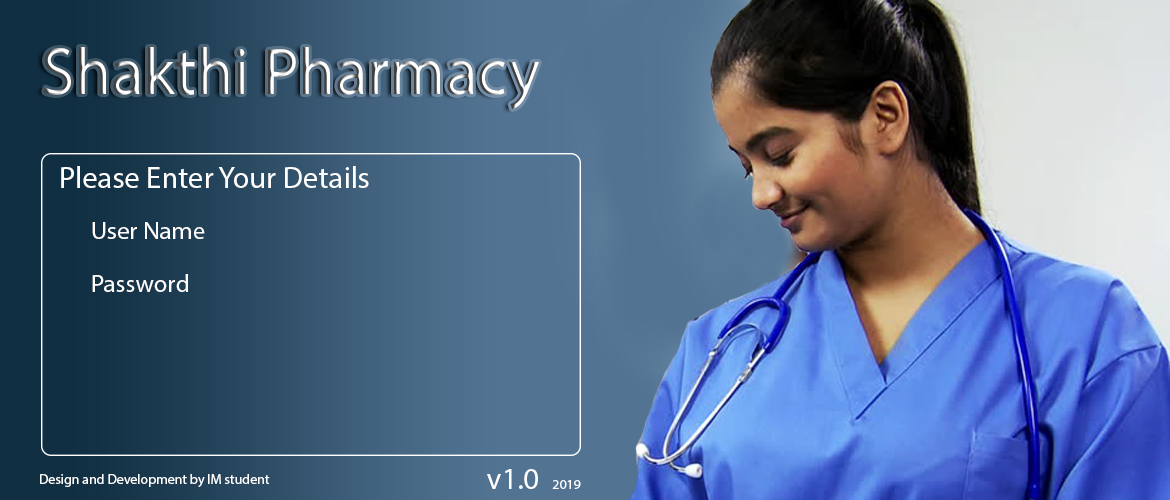
<style>
.page{position:relative;width:1170px;height:500px}
.page>*{position:absolute;margin:0}
.t1{font:66.7px "MyriadPro-Regular"}
.t2{font:30.6px "MyriadPro-Regular";color:#fefefe}
.t3{font:25px/52.8px "MyriadPro-Regular";color:#fefefe}
.t4{font:13.9px "MyriadPro-Regular";color:#fefefe}
.t5{font:13.9px "MyriadPro-Regular";color:#ffffff}
</style>
<div class="page">
<p class="t1" style="left:44px;top:47px;width:495px;height:62px">Shakthi Pharmacy</p>
<p class="t2" style="left:61px;top:166px;width:308px;height:22px">Please Enter Your Details</p>
<p class="t3" style="left:92px;top:222px;width:113px;height:70px">User Name<br>Password</p>
<p class="t2" style="left:487px;top:469px;width:94px;height:20px">v1.0  <span class="t4">2019</span></p>
<p class="t5" style="left:40px;top:474px;width:230px;height:13px">Design and Development by IM student</p>
</div>
